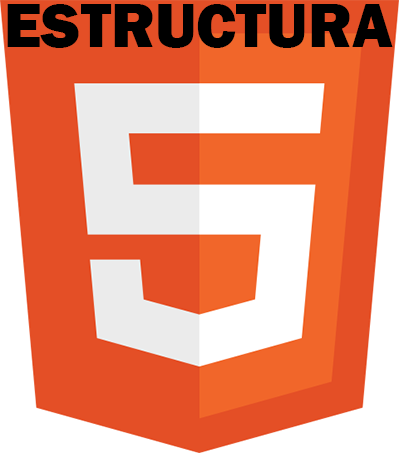
<style>
.page{position:relative;width:400px;height:453px;background:#e44f26}
.page>*{position:absolute;margin:0}
.t1{font:63.9px "FranklinGothic-Heavy";color:#000000}
</style>
<div class="page">
<p class="t1" style="left:7px;top:4px;width:386px;height:44px">ESTRUCTURA</p>
</div>
